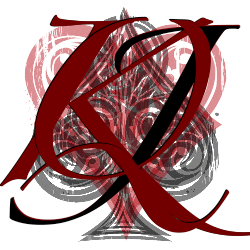
<style>
.page{position:relative;width:250px;height:250px;background:#ffffff}
.page>*{position:absolute;margin:0}
.t1{font:144px "Zapfino";color:#720000}
.t2{font:144px "Zapfino";color:#000000}
</style>
<div class="page">
<p class="t1" style="left:20px;top:16px;width:209px;height:216px">Q</p>
<p class="t1" style="left:21px;top:17px;width:209px;height:216px">Q</p>
<p class="t2" style="left:9px;top:25px;width:231px;height:200px">J</p>
<p class="t2" style="left:10px;top:24px;width:231px;height:200px">J</p>
</div>
